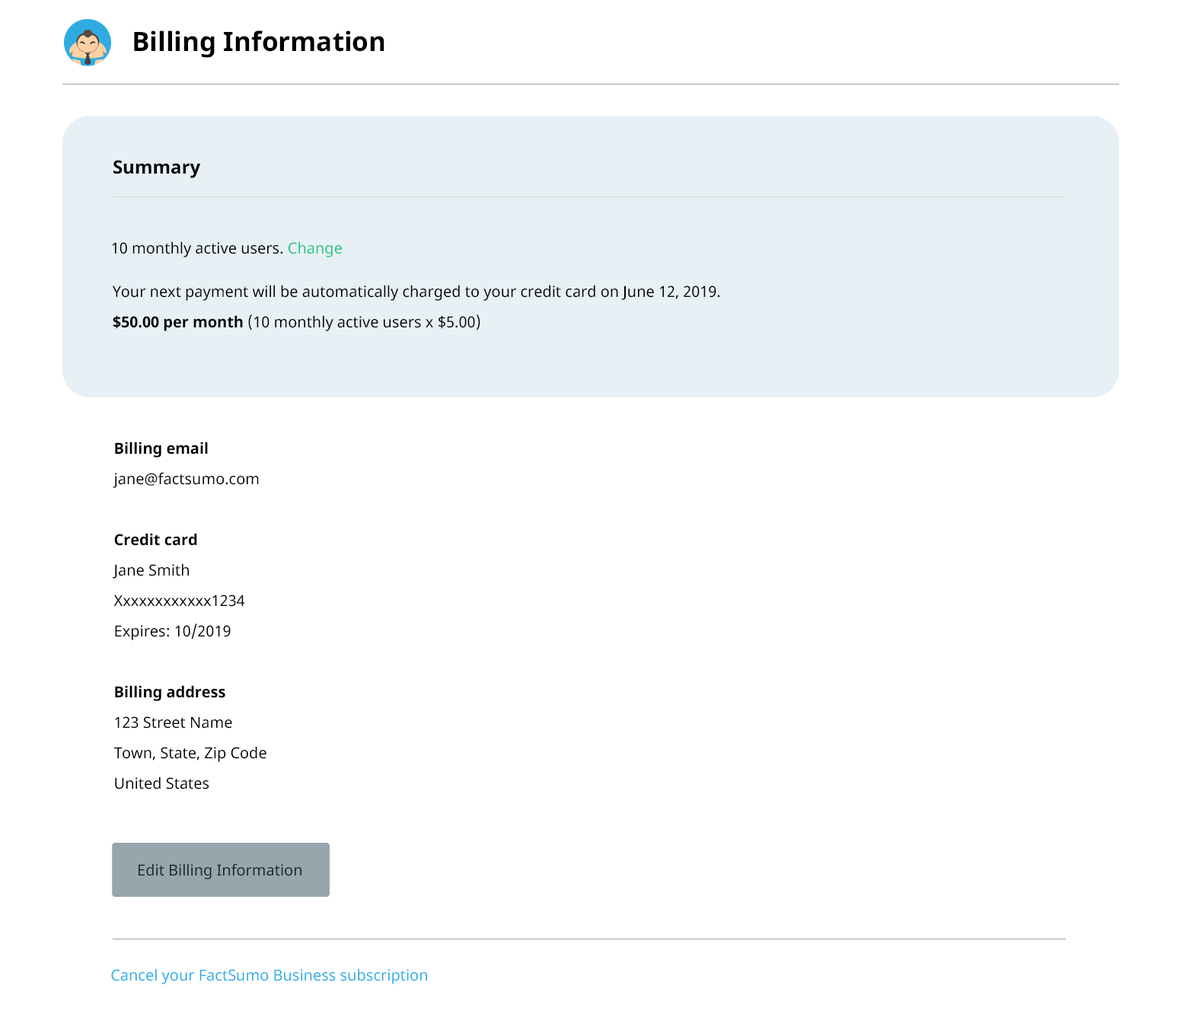
<style>
.page{position:relative;width:1180px;height:1011px;background:#ffffff}
.page>*{position:absolute;margin:0}
.t1{font:26.6px "NotoSans-Bold";color:#000000}
.t2{font:18.3px "NotoSans-Bold";color:#000000}
.t3{font:15.2px "NotoSans";color:#000000}
.t4{font:15.2px "NotoSans";color:#26c485}
.t5{font:15.2px/30.4px "NotoSans";color:#000000}
.t6{font:15.2px/30.4px "NotoSans-Bold";color:#000000}
.t7{font:15.2px "NotoSans";color:#222222}
.t8{font:15.2px "NotoSans";color:#2cade7}
</style>
<div class="page">
<p class="t1" style="left:134px;top:30px;width:250px;height:28px">Billing Information</p>
<p class="t2" style="left:113px;top:160px;width:88px;height:18px">Summary</p>
<p class="t3" style="left:112px;top:241px;width:230px;height:16px">10 monthly active users. <span class="t4">Change</span></p>
<p class="t5" style="left:112px;top:285px;width:608px;height:46px">Your next payment will be automatically charged to your credit card on June 12, 2019.<br><span class="t6">$50.00 per month </span>(10 monthly active users x $5.00)</p>
<p class="t5" style="left:113px;top:441px;width:153px;height:348px"><span class="t6">Billing email<br></span>jane@factsumo.com<br><br><span class="t6">Credit card<br></span>Jane Smith<br>Xxxxxxxxxxxx1234<br>Expires: 10/2019<br><span class="t6"><br>Billing address<br></span>123 Street Name<br>Town, State, Zip Code<br>United States</p>
<p class="t7" style="left:139px;top:863px;width:162px;height:16px">Edit Billing Information</p>
<p class="t8" style="left:111px;top:968px;width:316px;height:16px">Cancel your FactSumo Business subscription</p>
</div>
